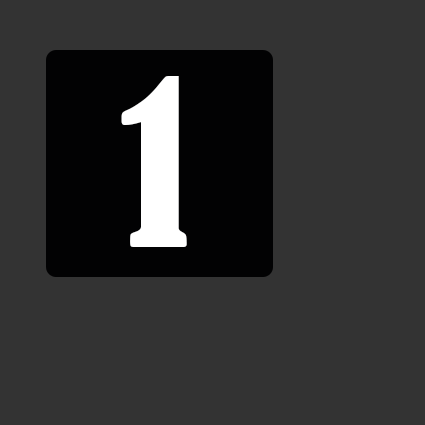
<style>
.page{position:relative;width:425px;height:425px;background:#333333}
.page>*{position:absolute;margin:0}
.t1{font:216px "BernardMT-Condensed";color:#ffffff}
</style>
<div class="page">
<p class="t1" style="left:121px;top:76px;width:66px;height:171px">1</p>
</div>
